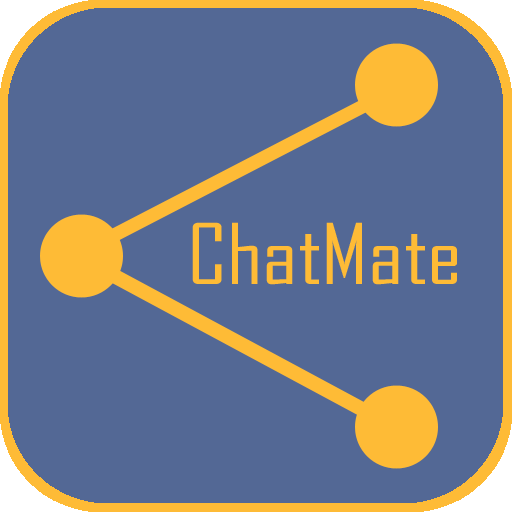
<style>
.page{position:relative;width:512px;height:512px;background:#536895}
.page>*{position:absolute;margin:0}
.t1{font:80px "AgencyFB-Reg";color:#febb36;scale:1.17 1}
</style>
<div class="page">
<p class="t1" style="left:192px;top:222px;width:265px;height:63px">ChatMate</p>
</div>
